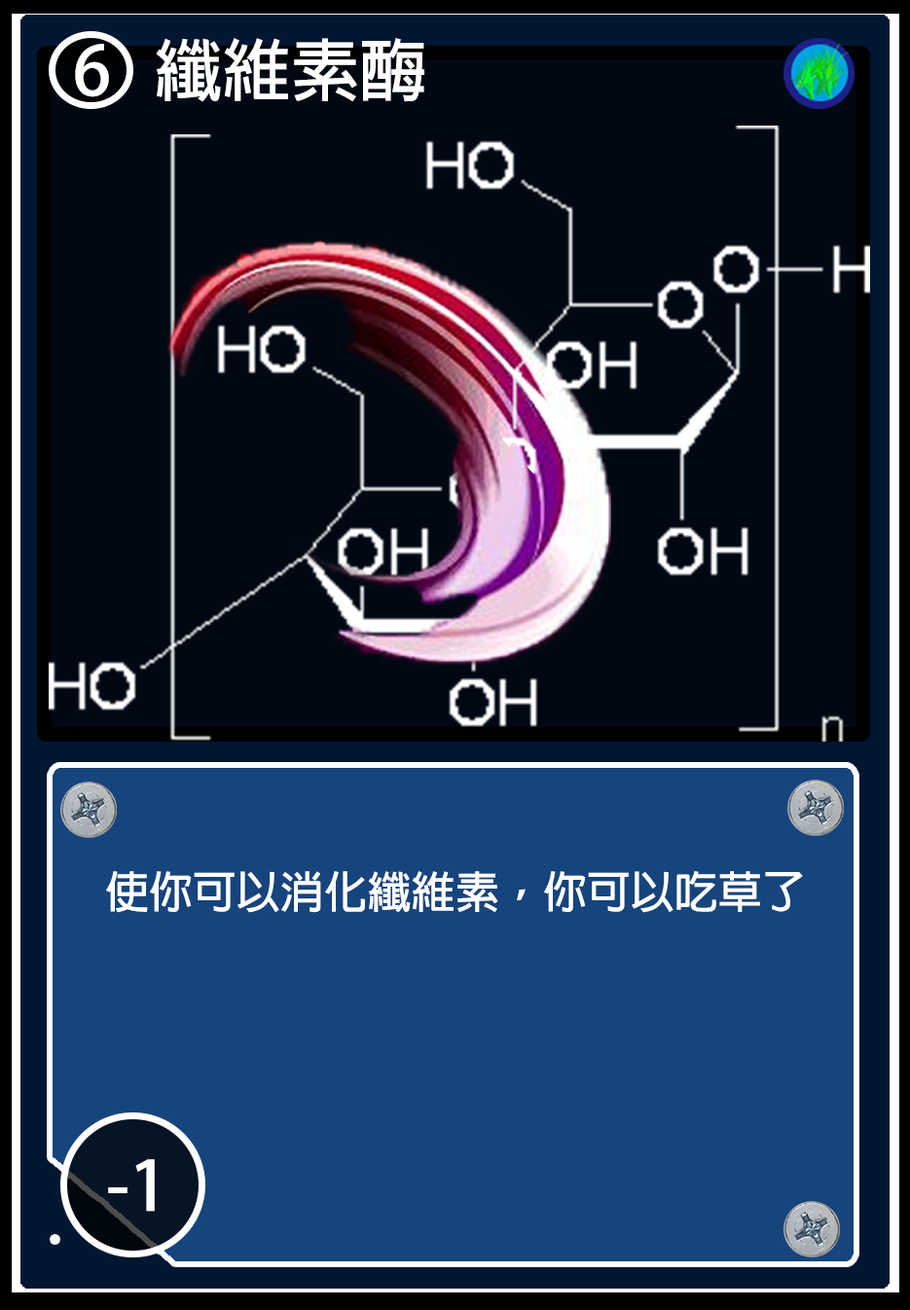
<style>
.page{position:relative;width:910px;height:1310px;background:#000913}
.page>*{position:absolute;margin:0}
.t1{font:67.8px "AdobeFanHeitiStd-Bold";color:#ffffff}
.t2{font:43.8px "AdobeFanHeitiStd-Bold";color:#ffffff}
.t3{font:68.1px "AdobeFanHeitiStd-Bold";color:#ffffff}
</style>
<div class="page">
<p class="t1" style="left:156px;top:38px;width:268px;height:64px">纖維素酶</p>
<p class="t1" style="left:75px;top:44px;width:34px;height:53px">6</p>
<p class="t2" style="left:106px;top:871px;width:697px;height:42px">使你可以消化纖維素，你可以吃草了</p>
<p class="t3" style="left:108px;top:1159px;width:47px;height:53px">-1</p>
</div>
